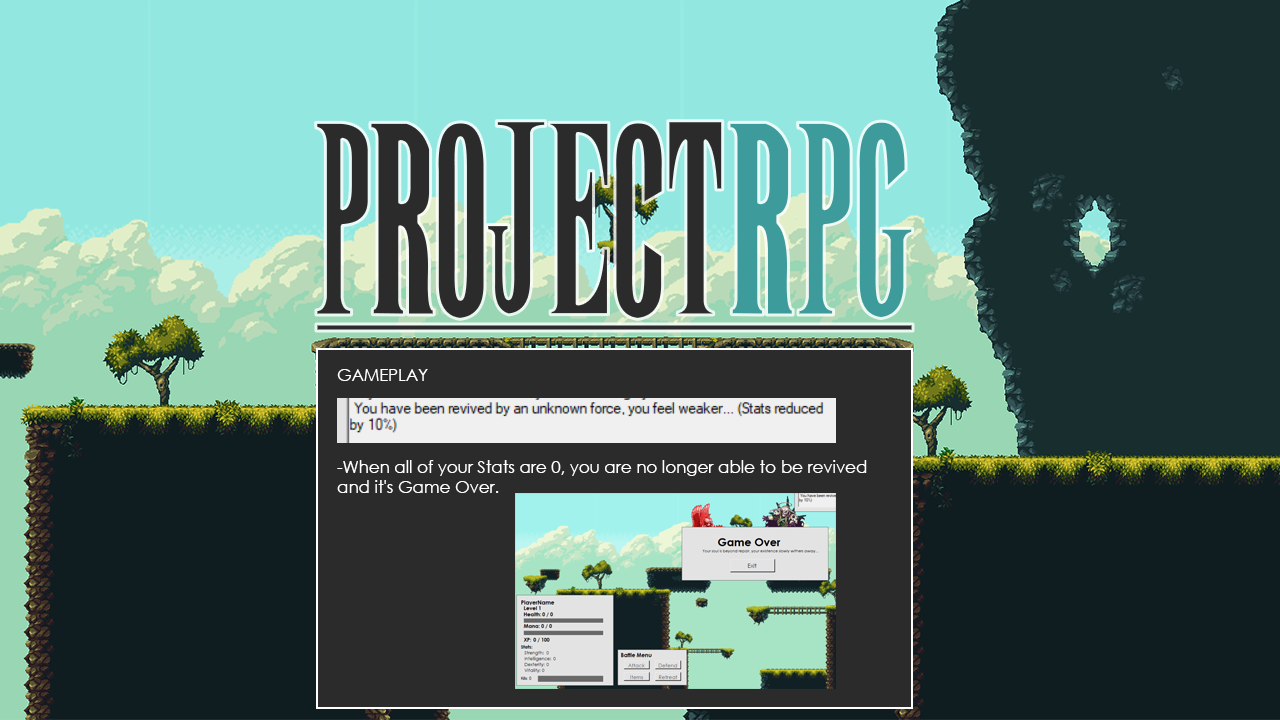
<style>
.page{position:relative;width:1280px;height:720px}
.page>*{position:absolute;margin:0}
.t1{font:200px "New";color:#2b2b2b}
.t2{font:200px "New";color:#3d9c9b}
.t3{font:16.7px "CenturyGothic";color:#ffffff}
</style>
<div class="page">
<p class="t1" style="left:315px;top:120px;width:598px;height:200px">PROJECT<span class="t2">RPG</span></p>
<p class="t3" style="left:337px;top:369px;width:91px;height:12px">GAMEPLAY</p>
<p class="t3" style="left:337px;top:460px;width:530px;height:33px">-When all of your Stats are 0, you are no longer able to be revived <br>and it's Game Over.</p>
</div>
